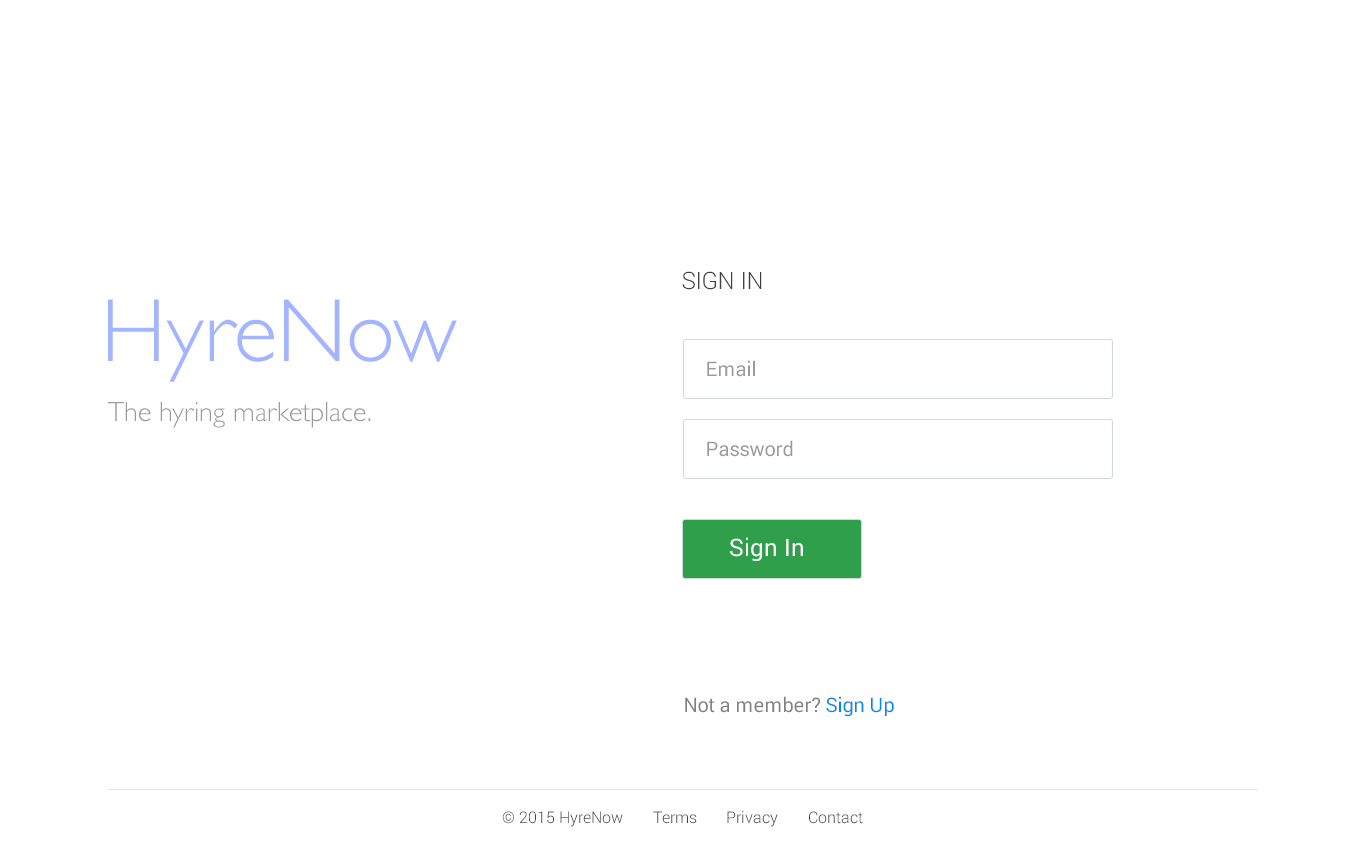
<style>
.page{position:relative;width:1366px;height:850px;background:#ffffff}
.page>*{position:absolute;margin:0}
.t1{font:24px "Roboto-Light";color:#404040}
.t2{font:90px "GillSans-Light";color:#a3b5ff}
.t3{font:20px "Roboto-Regular";color:#9a9a9a}
.t4{font:28px "GillSans-Light";color:#9a9a9a}
.t5{font:24px "Roboto-Regular";color:#ffffff}
.t6{font:20px "Roboto-Regular";color:#818181}
.t7{font:20px "Roboto-Regular";color:#008be7}
.t8{font:16px "Roboto-Light";color:#404040}
.t9{font:16px "Roboto-Light"}
</style>
<div class="page">
<p class="t1" style="left:682px;top:271px;width:80px;height:19px">SIGN IN</p>
<p class="t2" style="left:108px;top:299px;width:349px;height:83px">HyreNow</p>
<p class="t3" style="left:707px;top:360px;width:48px;height:17px">Email</p>
<p class="t4" style="left:108px;top:402px;width:263px;height:26px">The hyring marketplace.</p>
<p class="t3" style="left:707px;top:440px;width:86px;height:17px">Password</p>
<p class="t5" style="left:730px;top:537px;width:73px;height:24px">Sign In</p>
<p class="t6" style="left:685px;top:696px;width:209px;height:21px">Not a member? <span class="t7">Sign Up</span></p>
<p class="t8" style="left:502px;top:811px;width:121px;height:16px">© 2015 HyreNow</p>
<p class="t8" style="left:653px;top:811px;width:44px;height:13px">Terms</p>
<p class="t9" style="left:727px;top:810px;width:51px;height:17px">Privacy</p>
<p class="t8" style="left:809px;top:811px;width:54px;height:13px">Contact</p>
</div>
